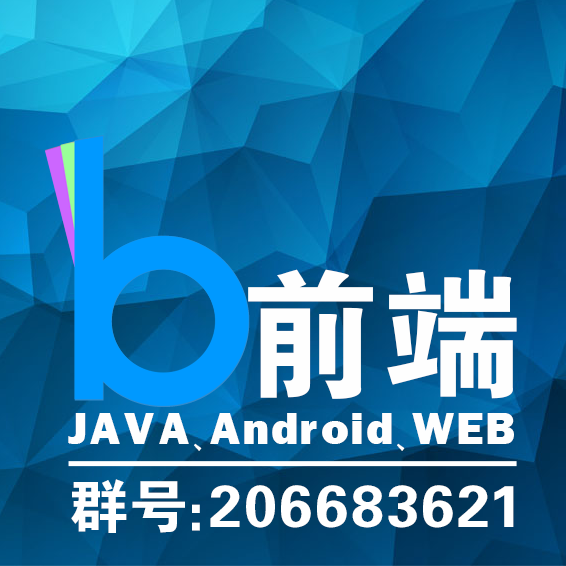
<style>
.page{position:relative;width:566px;height:566px}
.page>*{position:absolute;margin:0}
.t1{font:139.8px "FZDHTJW--GB1-0";letter-spacing:0.1em;color:#fefefe}
.t2{font:46.5px "FranklinGothic-Heavy";letter-spacing:0.1em;color:#fefefe}
.t3{font:46.5px "HYg2gj";letter-spacing:0.1em;color:#fefefe}
.t4{font:59px "FZDHTJW--GB1-0";letter-spacing:0.1em;color:#ffffff}
</style>
<div class="page">
<p class="t1" style="left:248px;top:269px;width:269px;height:130px">前端</p>
<p class="t2" style="left:68px;top:413px;width:446px;height:38px">JAVA<span class="t3">、</span>Android<span class="t3">、</span>WEB</p>
<p class="t4" style="left:71px;top:479px;width:443px;height:54px">群号：206683621</p>
</div>
